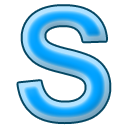
<style>
.page{position:relative;width:128px;height:128px;background:#ffffff}
.page>*{position:absolute;margin:0}
.t1{font:156px "Arial-BoldMT"}
</style>
<div class="page">
<p class="t1" style="left:18px;top:6px;width:92px;height:117px">S</p>
</div>
